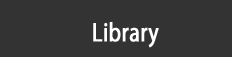
<style>
.page{position:relative;width:232px;height:57px;background:#333333}
.page>*{position:absolute;margin:0}
.t1{font:26.7px "MyriadPro-Regular";color:#ffffff;font-weight:bold;scale:0.81 1}
</style>
<div class="page">
<p class="t1" style="left:93px;top:22px;width:66px;height:26px">Library</p>
</div>
